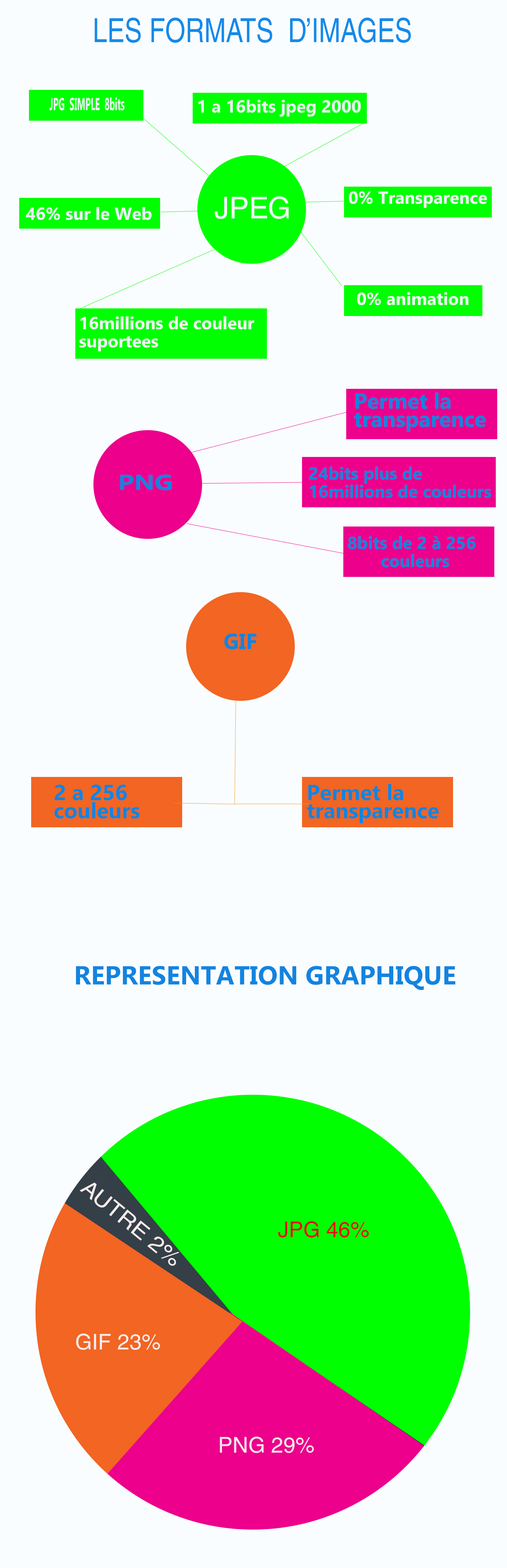
<style>
.page{position:relative;width:507px;height:1568px;background:#fafdff}
.page>*{position:absolute;margin:0}
.t1{font:33.3px "HelveticaLTStd-Roman";color:#148ae9;scale:0.78 1}
.t2{font:17.4px "Ebrima-Bold";color:#eef3f7;scale:0.5 1}
.t3{font:17.4px "Ebrima-Bold";color:#e9eff3}
.t4{font:29.9px "HelveticaLTStd-Roman";color:#f2f7fa}
.t5{font:17.4px "Ebrima-Bold";color:#eeeff7}
.t6{font:17.4px "Ebrima-Bold";color:#edeff9}
.t7{font:17.4px "Ebrima-Bold";color:#f1f2f8}
.t8{font:17.4px/18.1px "Ebrima-Bold";color:#f2f3f7}
.t9{font:21.7px/18.1px "Ebrima-Bold";color:#1284e0}
.t10{font:17.4px/18.1px "Ebrima-Bold";color:#1284e0}
.t11{font:21.7px "Ebrima-Bold";color:#1284e0;scale:1.2 1}
.t12{font:21.7px "Ebrima-Bold";color:#1284e0}
.t13{font:21.8px/18.1px "Ebrima-Bold";color:#1284e0}
.t14{font:26.1px "Ebrima-Bold";color:#1284e0}
.t15{font:21.6px "HelveticaLTStd-Roman";color:#f5ebeb;scale:1.11 1}
.t16{font:21.7px "HelveticaLTStd-Roman";color:#dd0d0d}
.t17{font:21.7px "HelveticaLTStd-Roman";color:#f5eded}
.t18{font:21.6px "HelveticaLTStd-Roman";color:#f5ebeb}
</style>
<div class="page">
<p class="t1" style="left:95px;top:17px;width:316px;height:26px">LES FORMATS  D’IMAGES</p>
<p class="t2" style="left:49px;top:97px;width:76px;height:14px">JPG  SIMPLE  8bits</p>
<p class="t3" style="left:199px;top:100px;width:162px;height:17px">1 a 16bits jpeg 2000</p>
<p class="t4" style="left:215px;top:196px;width:74px;height:23px">JPEG</p>
<p class="t5" style="left:349px;top:191px;width:138px;height:17px">0% Transparence</p>
<p class="t6" style="left:26px;top:207px;width:126px;height:13px">46% sur le Web</p>
<p class="t7" style="left:357px;top:292px;width:112px;height:13px">0% animation</p>
<p class="t8" style="left:79px;top:316px;width:175px;height:36px">16millions de couleur <br>suportees</p>
<p class="t9" style="left:354px;top:392px;width:132px;height:40px">Permet la<br>transparence</p>
<p class="t10" style="left:309px;top:466px;width:182px;height:32px">24bits plus de<br>16millions de couleurs</p>
<p class="t11" style="left:120px;top:474px;width:52px;height:16px">PNG</p>
<p class="t10" style="left:348px;top:536px;width:128px;height:31px">8bits de 2 à 256<br>       couleurs</p>
<p class="t12" style="left:224px;top:633px;width:33px;height:16px">GIF</p>
<p class="t13" style="left:54px;top:785px;width:86px;height:34px">2 a 256<br>   couleurs</p>
<p class="t13" style="left:307px;top:784px;width:132px;height:39px">Permet la <br>transparence</p>
<p class="t14" style="left:76px;top:966px;width:380px;height:24px">REPRESENTATION GRAPHIQUE</p>
<p class="t15" style="left:80px;top:1182px;width:99px;height:84px;rotate:39deg">AUTRE 2%</p>
<p class="t16" style="left:278px;top:1221px;width:91px;height:17px">JPG 46%</p>
<p class="t17" style="left:76px;top:1334px;width:84px;height:16px">GIF 23%</p>
<p class="t18" style="left:220px;top:1436px;width:94px;height:17px">PNG 29%</p>
</div>
